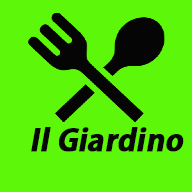
<style>
.page{position:relative;width:192px;height:192px;background:#5df809}
.page>*{position:absolute;margin:0}
.t1{font:30px "KozGoPr6N-Bold";color:#070707;font-weight:bold;font-style:italic}
</style>
<div class="page">
<p class="t1" style="left:31px;top:127px;width:153px;height:25px">Il Giardino</p>
</div>
